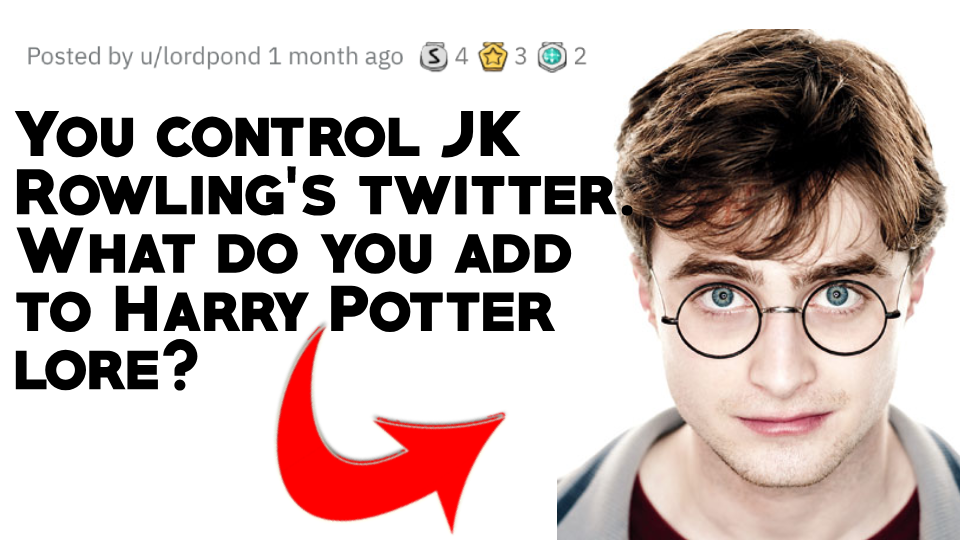
<style>
.page{position:relative;width:960px;height:540px;background:#ffffff}
.page>*{position:absolute;margin:0}
.t1{font:58.3px "PRIMETIME-Regular";color:#000000}
</style>
<div class="page">
<p class="t1" style="left:14px;top:110px;width:619px;height:281px">You control JK <br>Rowling's twitter. <br>What do you add <br>to Harry Potter <br>lore?</p>
</div>
